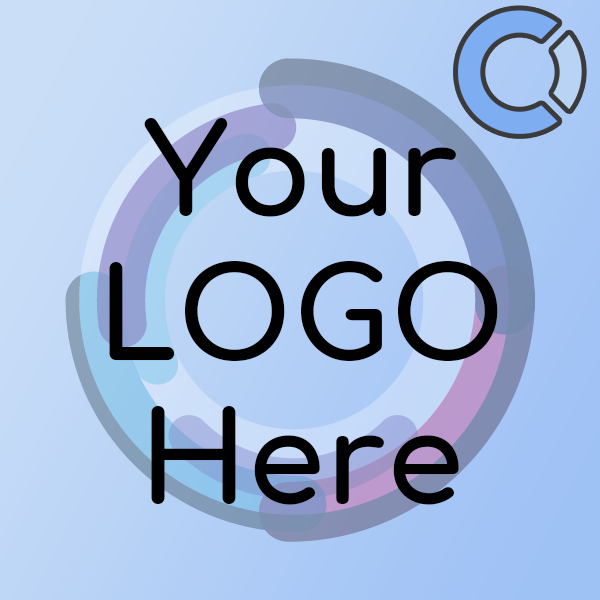
<style>
.page{position:relative;width:600px;height:600px}
.page>*{position:absolute;margin:0}
.t1{font:125px/48px "Comfortaa-Bold";color:#010101}
</style>
<div class="page">
<p class="t1" style="left:109px;top:118px;width:389px;height:387px;text-align:center">Your<br><br><br>LOGO<br><br><br>Here</p>
</div>
